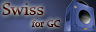
<style>
.page{position:relative;width:96px;height:32px}
.page>*{position:absolute;margin:0}
.t1{font:10px "Constantia"}
.t2{font:18px "Constantia"}
</style>
<div class="page">
<p class="t1" style="left:2px;top:3px;width:58px;height:24px"><span class="t2">Swiss<br></span>            for GC</p>
</div>
